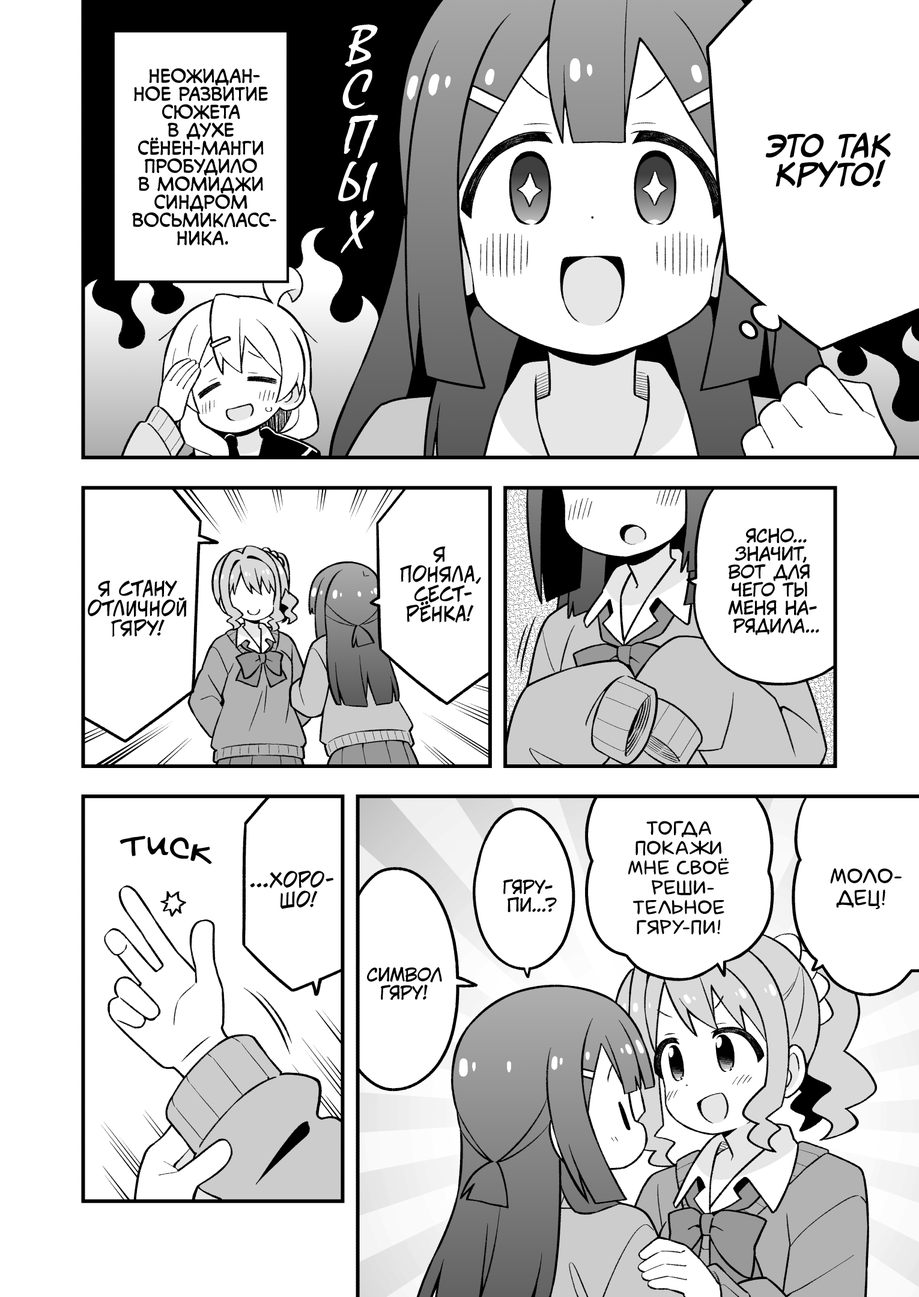
<style>
.page{position:relative;width:919px;height:1297px;background:#ffffff}
.page>*{position:absolute;margin:0}
.t1{font:54.1px "MistralC";color:#ffffff;text-transform:uppercase;font-style:italic}
.t2{font:18px "v_CCMonologous";color:#000000;text-transform:uppercase}
.t3{font:28.8px "CCMeanwhile";color:#000000;text-transform:uppercase;font-weight:bold;font-style:italic}
.t4{font:18px "KuraiVoice2";color:#000000;text-transform:uppercase}
.t5{font:19.8px "v_CCJeffCampbell";color:#000000;text-transform:uppercase}
.t6{font:19.8px "laCartoonerie";color:#000000;text-transform:uppercase}
.t7{font:39.6px "v_Augie";color:#000000}
.t8{font:21.6px "laCartoonerie";color:#000000;text-transform:uppercase}
</style>
<div class="page">
<p class="t1" style="left:345px;top:24px;width:33px;height:43px">в</p>
<p class="t2" style="left:132px;top:68px;width:144px;height:178px;text-align:center">Неожидан-<br>ное развитие<br>сюжета<br>в духе<br>сёнен-манги<br>пробудило<br>в Момиджи<br>синдром<br>восьмикласс-<br>ника.</p>
<p class="t1" style="left:342px;top:69px;width:30px;height:40px">с</p>
<p class="t1" style="left:344px;top:115px;width:34px;height:44px">п</p>
<p class="t3" style="left:766px;top:132px;width:125px;height:56px;text-align:center">Это так<br>круто!</p>
<p class="t1" style="left:338px;top:161px;width:40px;height:41px">ы</p>
<p class="t1" style="left:341px;top:210px;width:33px;height:43px">х</p>
<p class="t4" style="left:728px;top:528px;width:91px;height:108px;text-align:center">Ясно...<br>Значит,<br>вот для<br>чего ты<br>меня на-<br>рядила...</p>
<p class="t5" style="left:400px;top:547px;width:81px;height:76px;text-align:center">Я<br>поняла,<br>сест-<br>рёнка!</p>
<p class="t5" style="left:88px;top:580px;width:99px;height:57px;text-align:center">Я стану<br>отличной<br>гяру!</p>
<p class="t6" style="left:628px;top:821px;width:101px;height:114px;text-align:center">Тогда<br>покажи<br>мне своё<br>реши-<br>тельное<br>гяру-пи!</p>
<p class="t7" style="left:120px;top:836px;width:92px;height:28px;rotate:5deg">тиск</p>
<p class="t8" style="left:830px;top:869px;width:72px;height:40px;text-align:center">Моло-<br>дец!</p>
<p class="t5" style="left:250px;top:871px;width:84px;height:38px;text-align:center">...Хоро-<br>шо!</p>
<p class="t4" style="left:503px;top:879px;width:54px;height:33px;text-align:center">Гяру-<br>пи...?</p>
<p class="t4" style="left:367px;top:967px;width:75px;height:33px;text-align:center">Символ<br>гяру!</p>
</div>
